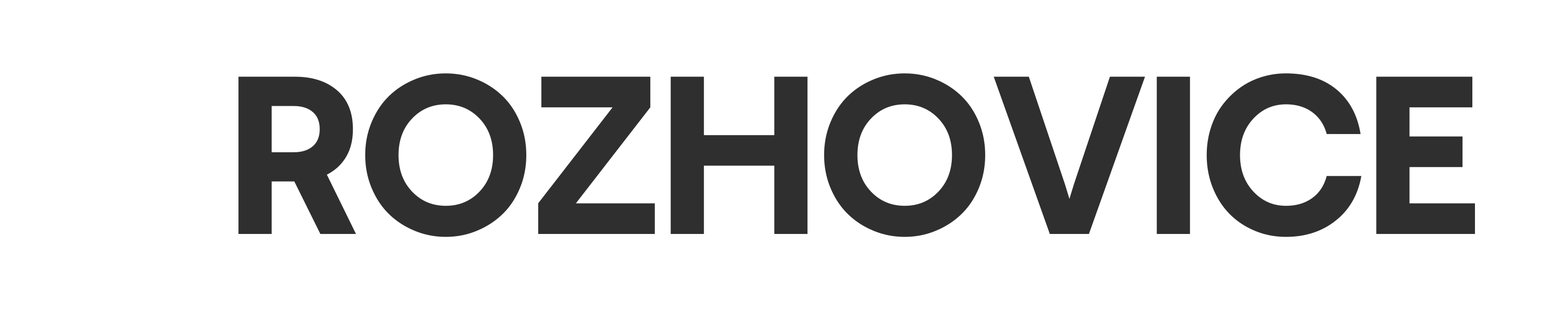
<style>
.page{position:relative;width:1568px;height:314px;background:#ffffff}
.page>*{position:absolute;margin:0}
.t1{font:224.3px "TripSans-Bold";color:#2f2f2f}
</style>
<div class="page">
<p class="t1" style="left:238px;top:73px;width:1237px;height:164px">ROZHOVICE</p>
</div>
